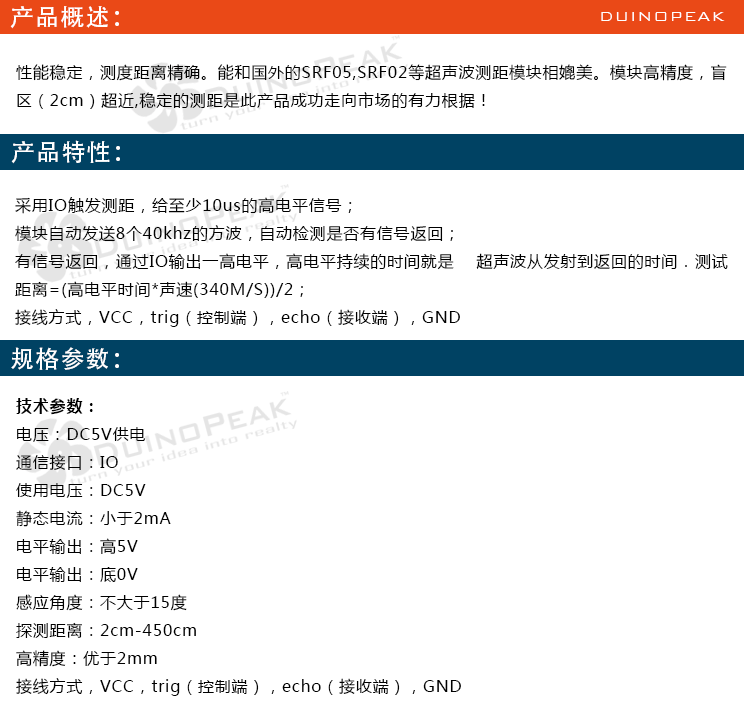
<style>
.page{position:relative;width:744px;height:710px;background:#ffffff}
.page>*{position:absolute;margin:0}
.t1{font:24px "AdobeHeitiStd-Regular";letter-spacing:0.05em;color:#ffffff}
.t2{font:18px "BankGothicBT-Light";letter-spacing:0.05em;color:#ffffff}
.t3{font:16px "MicrosoftYaHei";letter-spacing:0.05em;color:#000000}
.t4{font:16px "MicrosoftYaHei-Bold";letter-spacing:0.05em;color:#000000}
</style>
<div class="page">
<p class="t1" style="left:10px;top:6px;width:109px;height:23px">产品概述：</p>
<p class="t2" style="left:601px;top:12px;width:124px;height:9px">DUINOPEAK</p>
<p class="t3" style="left:16px;top:64px;width:711px;height:45px">性能稳定，测度距离精确。能和国外的SRF05,SRF02等超声波测距模块相媲美。模块高精度，盲<br>区（2cm）超近,稳定的测距是此产品成功走向市场的有力根据！</p>
<p class="t1" style="left:11px;top:140px;width:109px;height:24px">产品特性：</p>
<p class="t3" style="left:15px;top:197px;width:713px;height:130px">采用IO触发测距，给至少10us的高电平信号；<br>模块自动发送8个40khz的方波，自动检测是否有信号返回；<br>有信号返回，通过IO输出一高电平，高电平持续的时间就是    超声波从发射到返回的时间．测试<br>距离=(高电平时间*声速(340M/S))/2；<br>接线方式，VCC，trig（控制端），echo（接收端），GND</p>
<p class="t1" style="left:11px;top:347px;width:108px;height:23px">规格参数：</p>
<p class="t3" style="left:16px;top:398px;width:445px;height:298px"><span class="t4">技术参数：<br></span>电压：DC5V供电<br>通信接口：IO<br>使用电压：DC5V<br>静态电流：小于2mA<br>电平输出：高5V<br>电平输出：底0V<br>感应角度：不大于15度<br>探测距离：2cm-450cm<br>高精度：优于2mm<br>接线方式，VCC，trig（控制端），echo（接收端），GND</p>
</div>
